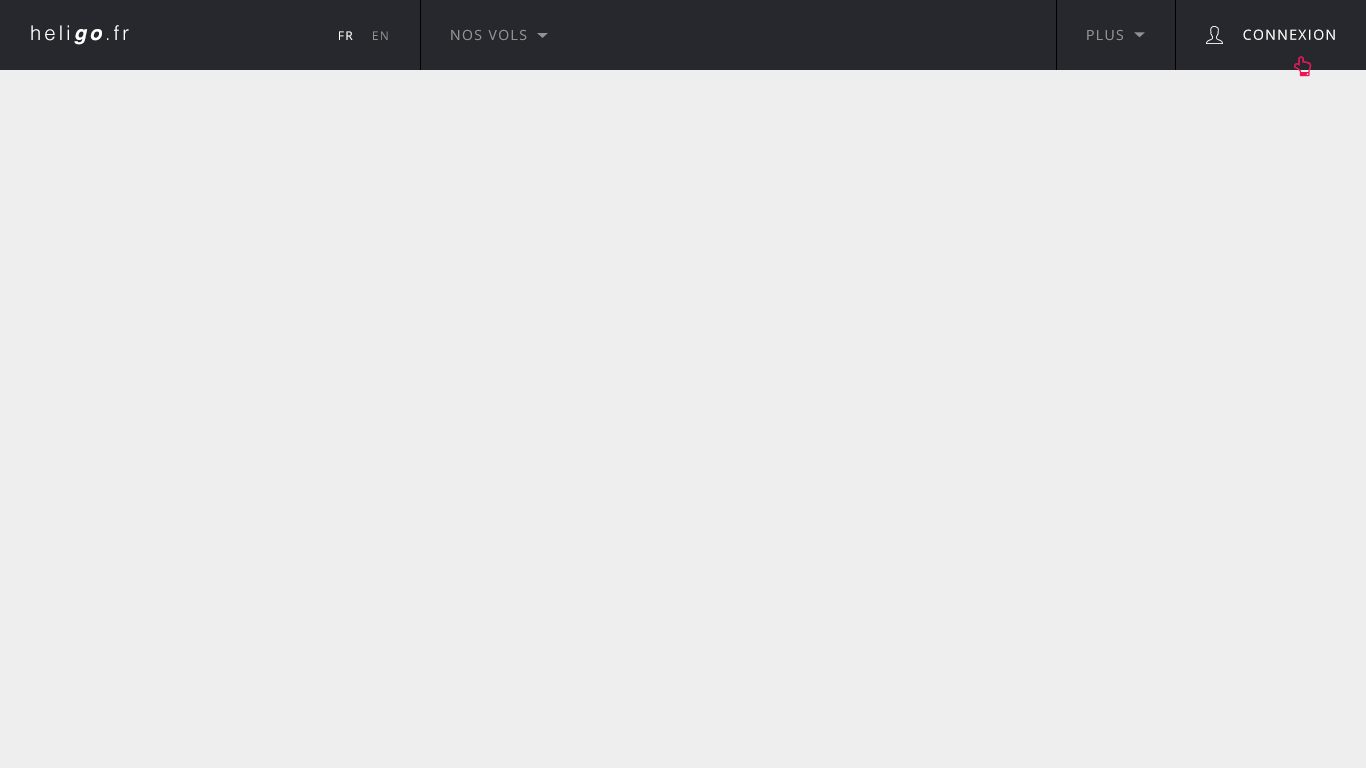
<style>
.page{position:relative;width:1366px;height:768px;background:#eeeeee}
.page>*{position:absolute;margin:0}
.t1{font:20px "Helvetica-Light";letter-spacing:0.16em;color:#ffffff}
.t2{font:20px "Helvetica-BoldOblique";letter-spacing:0.16em;color:#ffffff}
.t3{font:14px "OpenSans";letter-spacing:0.1em;color:#929292;text-transform:uppercase}
.t4{font:14px "OpenSans";letter-spacing:0.1em;color:#ffffff;text-transform:uppercase}
.t5{font:12px "OpenSans";letter-spacing:0.1em;color:#ffffff;text-transform:uppercase}
.t6{font:12px "OpenSans";letter-spacing:0.1em;color:#929292;text-transform:uppercase}
</style>
<div class="page">
<p class="t1" style="left:31px;top:25px;width:98px;height:20px">heli<span class="t2">go</span>.fr</p>
<p class="t3" style="left:451px;top:29px;width:76px;height:12px">nos vols</p>
<p class="t3" style="left:1087px;top:29px;width:36px;height:12px">plus</p>
<p class="t4" style="left:1243px;top:29px;width:92px;height:11px">connexion</p>
<p class="t5" style="left:339px;top:31px;width:14px;height:9px">Fr</p>
<p class="t6" style="left:373px;top:31px;width:15px;height:9px">En</p>
</div>
